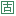
<style>
.page{position:relative;width:16px;height:16px;background:#ffffff}
.page>*{position:absolute;margin:0}
.t1{font:14px "NSimSun";color:#3d855f}
</style>
<div class="page">
<p class="t1" style="left:1px;top:1px;width:13px;height:13px">固</p>
</div>
